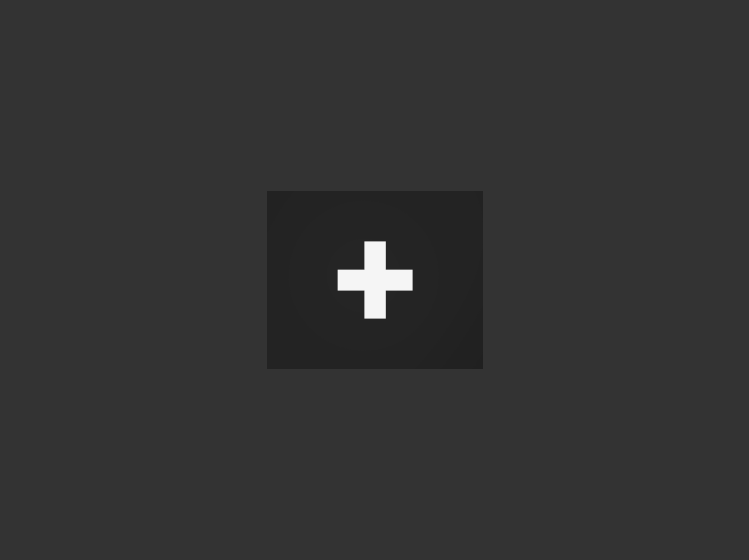
<style>
.page{position:relative;width:749px;height:560px;background:#333333}
.page>*{position:absolute;margin:0}
.t1{font:150px "Bauhaus93";color:#f5f5f5;font-variant:small-caps}
</style>
<div class="page">
<p class="t1" style="left:337px;top:241px;width:76px;height:78px">+</p>
</div>
